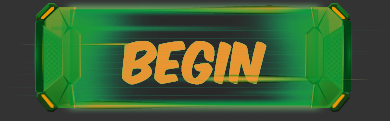
<style>
.page{position:relative;width:390px;height:121px;background:#333333}
.page>*{position:absolute;margin:0}
.t1{font:48px "KomikaAxis";color:#e89532}
</style>
<div class="page">
<p class="t1" style="left:122px;top:41px;width:145px;height:44px">BEGIN</p>
<p class="t1" style="left:122px;top:41px;width:145px;height:44px">BEGIN</p>
<p class="t1" style="left:122px;top:41px;width:145px;height:44px">BEGIN</p>
</div>
